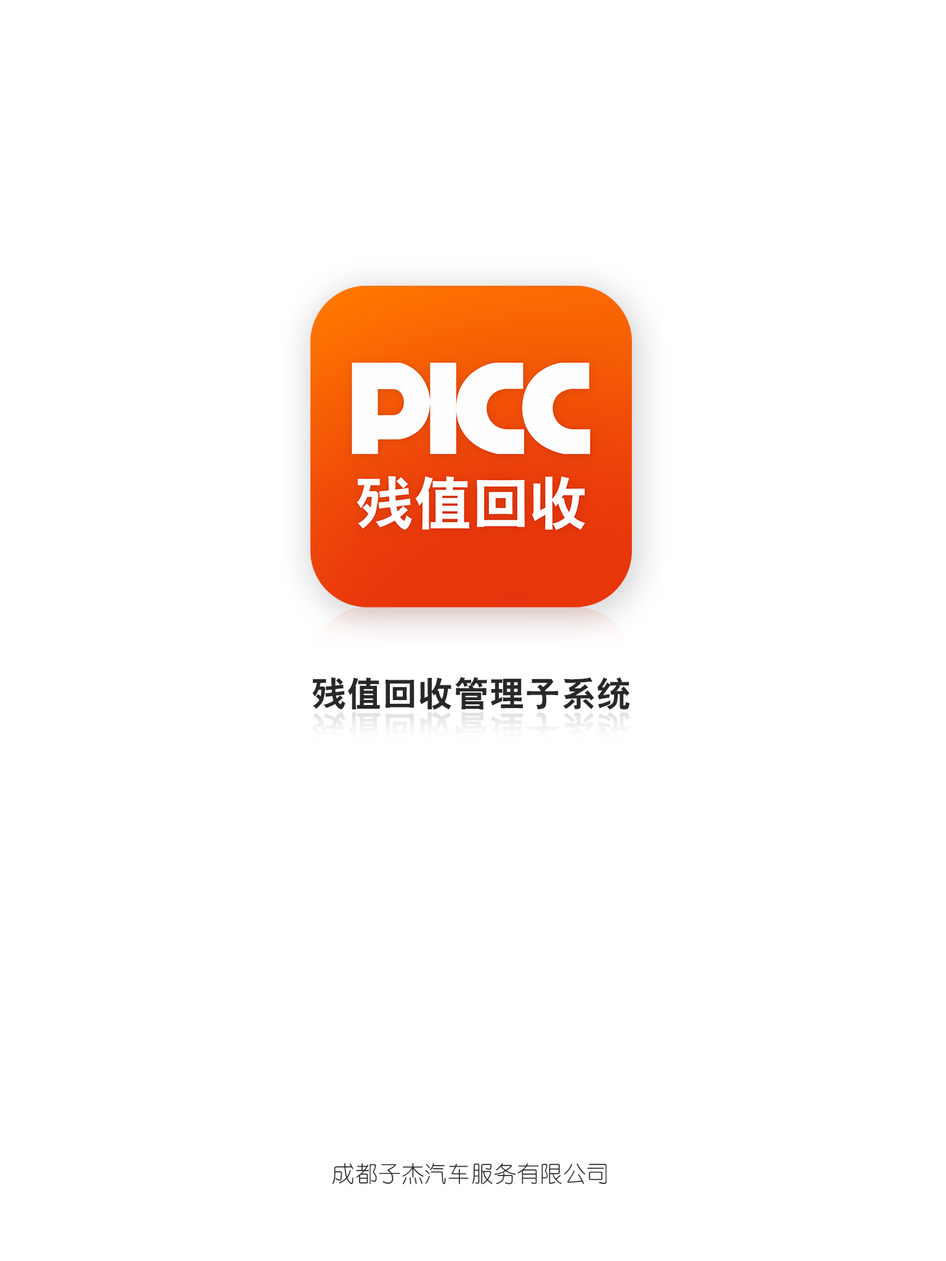
<style>
.page{position:relative;width:946px;height:1261px;background:#ffffff}
.page>*{position:absolute;margin:0}
.t1{font:34.6px "HeitiCSEG";letter-spacing:0.028em;color:#282828;text-transform:uppercase}
.t2{font:34.1px "HeitiCSEG";letter-spacing:0.028em;color:#f5f5f5;text-transform:uppercase}
.t3{font:22.5px "YouYuan";letter-spacing:0.028em;color:#282828}
</style>
<div class="page">
<p class="t1" style="left:312px;top:677px;width:318px;height:33px">残值回收管理子系统</p>
<p class="t2" style="left:312px;top:712px;width:318px;height:32px">残值回收管理子系统</p>
<p class="t3" style="left:332px;top:1163px;width:274px;height:22px">成都子杰汽车服务有限公司</p>
</div>
